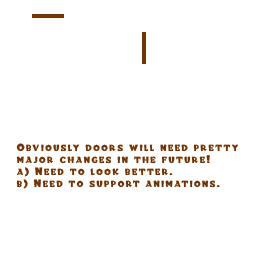
<style>
.page{position:relative;width:256px;height:256px;background:#ffffff}
.page>*{position:absolute;margin:0}
.t1{font:10px "BlitzkriegNF";letter-spacing:0.159em;color:#703404}
</style>
<div class="page">
<p class="t1" style="left:16px;top:143px;width:223px;height:46px">Obviously doors will need pretty<br>major changes in the future!<br>a) Need to look better.<br>b) Need to support animations.</p>
</div>
